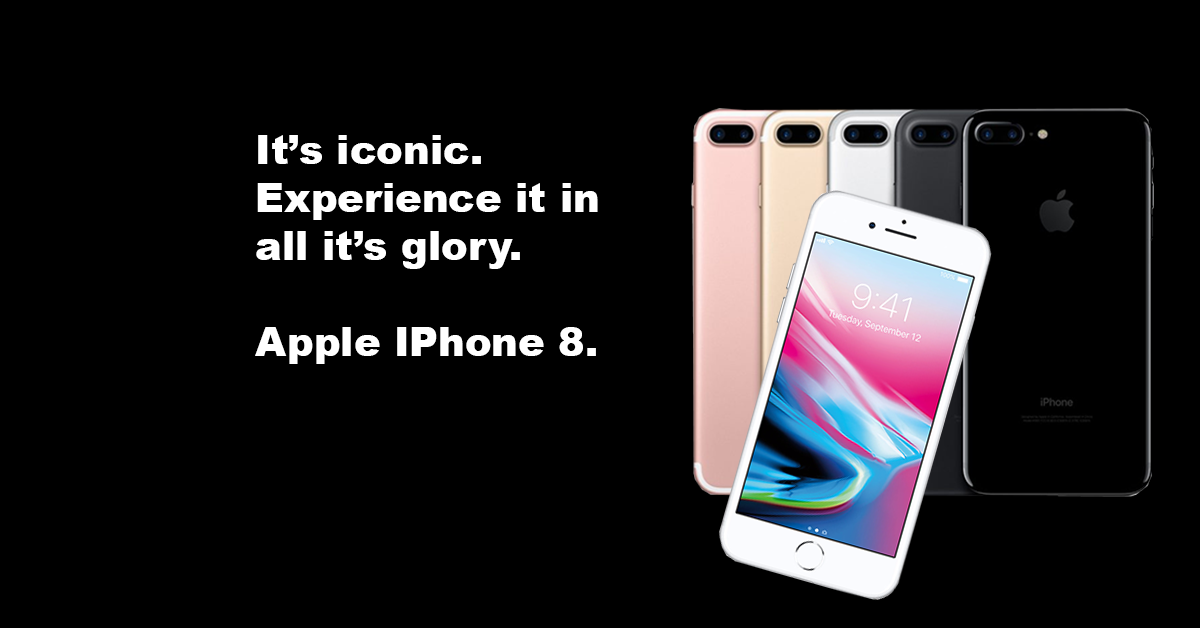
<style>
.page{position:relative;width:1200px;height:628px;background:#000000}
.page>*{position:absolute;margin:0}
.t1{font:40px "Arial-Black";color:#ffffff}
</style>
<div class="page">
<p class="t1" style="left:255px;top:135px;width:343px;height:229px">It’s iconic. <br>Experience it in all it’s glory.<br><br>Apple IPhone 8.</p>
</div>
